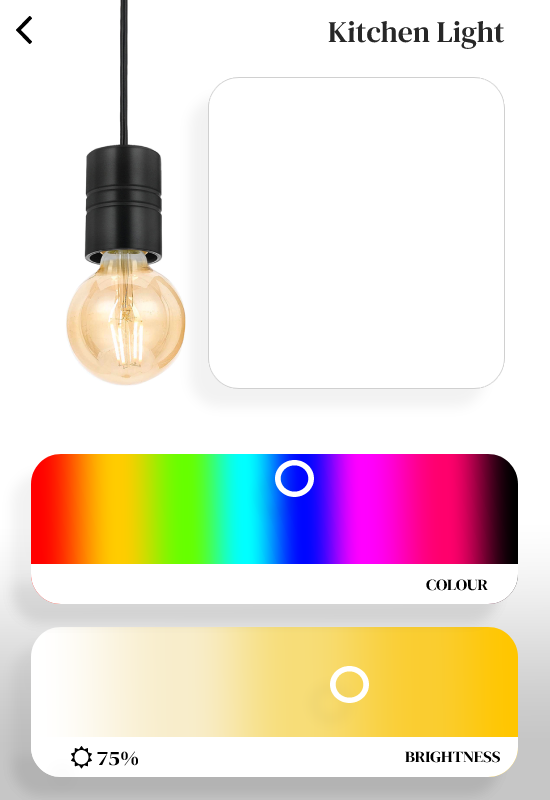
<style>
.page{position:relative;width:550px;height:800px;background:#ffffff}
.page>*{position:absolute;margin:0}
.t1{font:30px "DMSerifText-Regular";color:#272727}
.t2{font:15.5px "DMSerifDisplay-Regular";color:#000000;scale:1.09 1}
.t3{font:20.6px "DMSerifDisplay-Regular";color:#000000;scale:1.09 1}
</style>
<div class="page">
<p class="t1" style="left:328px;top:20px;width:177px;height:29px">Kitchen Light</p>
<p class="t2" style="left:426px;top:579px;width:62px;height:12px">COLOUR</p>
<p class="t3" style="left:97px;top:751px;width:42px;height:15px">75%</p>
<p class="t2" style="left:405px;top:751px;width:96px;height:12px">BRIGHTNESS</p>
</div>
